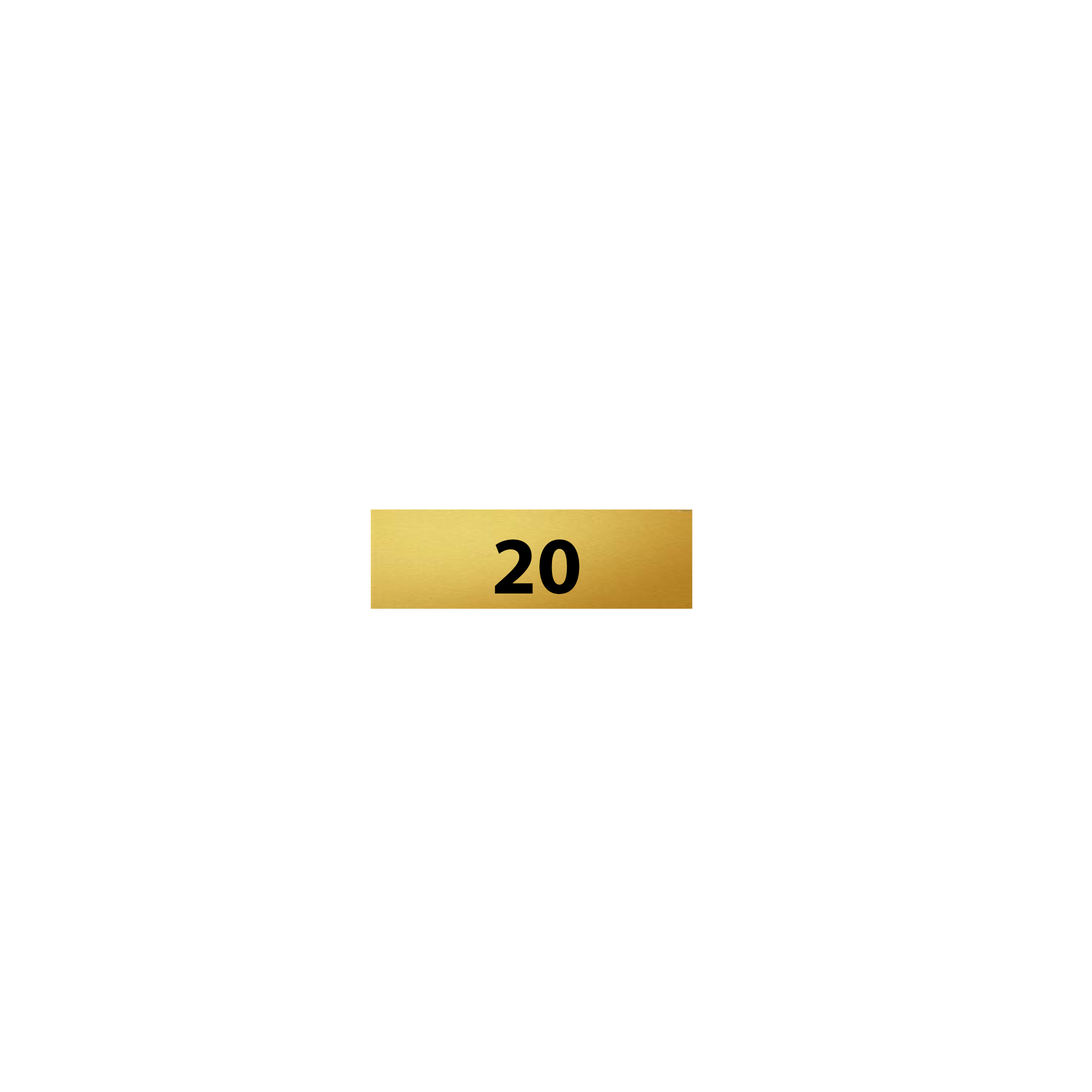
<style>
.page{position:relative;width:1092px;height:1092px;background:#ffffff}
.page>*{position:absolute;margin:0}
.t1{font:81.9px "MyriadPro-Bold";color:#000000}
</style>
<div class="page">
<p class="t1" style="left:495px;top:539px;width:84px;height:55px">20</p>
</div>
